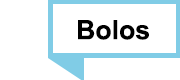
<style>
.page{position:relative;width:180px;height:80px;background:#ffffff}
.page>*{position:absolute;margin:0}
.t1{font:26.7px "Arial-BoldMT";color:#000000}
</style>
<div class="page">
<p class="t1" style="left:78px;top:20px;width:71px;height:20px">Bolos</p>
</div>
